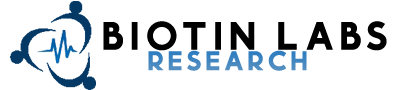
<style>
.page{position:relative;width:400px;height:90px;background:#ffffff}
.page>*{position:absolute;margin:0}
.t1{font:53.1px "Momcake-Bold";letter-spacing:0.1em;color:#000000}
.t2{font:36.3px "Momcake-Bold";letter-spacing:0.1em;color:#4185c0}
</style>
<div class="page">
<p class="t1" style="left:103px;top:21px;width:284px;height:30px">BioTin Labs</p>
<p class="t2" style="left:148px;top:50px;width:159px;height:21px">RESEARCH</p>
</div>
